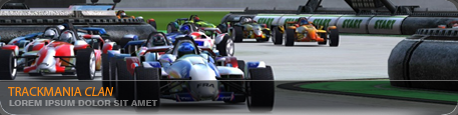
<style>
.page{position:relative;width:458px;height:115px}
.page>*{position:absolute;margin:0}
.t1{font:13px "MyriadPro-Regular";color:#f78b17}
.t2{font:13px "MyriadPro-It";color:#f78b17}
.t3{font:9px "Swiss721BT-Heavy";color:#969799}
</style>
<div class="page">
<p class="t1" style="left:8px;top:87px;width:106px;height:9px">TRACKMANIA <span class="t2">CLAN</span></p>
<p class="t3" style="left:9px;top:100px;width:149px;height:6px">LOREM IPSUM DOLOR SIT AMET</p>
</div>
